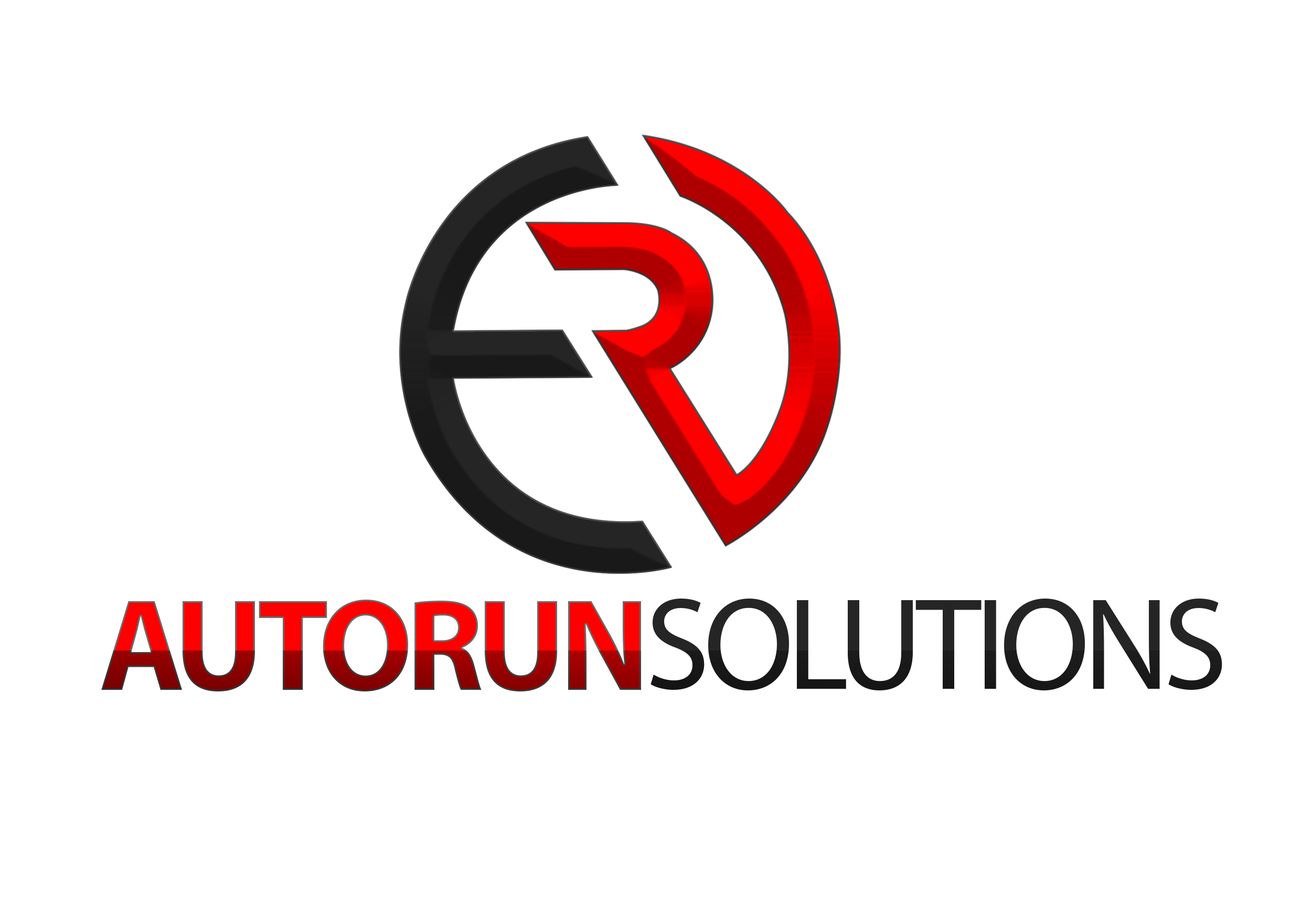
<style>
.page{position:relative;width:1301px;height:917px;background:#ffffff}
.page>*{position:absolute;margin:0}
.t1{font:131.1px "MyriadPro-Bold";letter-spacing:-0.05em;text-transform:uppercase}
.t2{font:131.1px "MyriadPro-Regular";letter-spacing:-0.05em;color:#252525;text-transform:uppercase}
</style>
<div class="page">
<p class="t1" style="left:101px;top:599px;width:540px;height:92px">Autorun</p>
<p class="t2" style="left:650px;top:598px;width:572px;height:92px">Solutions</p>
</div>
